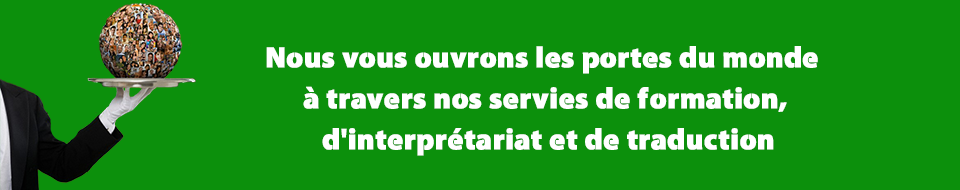
<style>
.page{position:relative;width:960px;height:190px;background:#0c900c}
.page>*{position:absolute;margin:0}
.t1{font:29.2px/40.9px "Cleanvertising-Black";color:#ffffff;font-weight:bold}
</style>
<div class="page">
<p class="t1" style="left:266px;top:46px;width:552px;height:110px;text-align:center">Nous vous ouvrons les portes du monde <br>à travers nos servies de formation,<br> d'interprétariat et de traduction</p>
</div>
